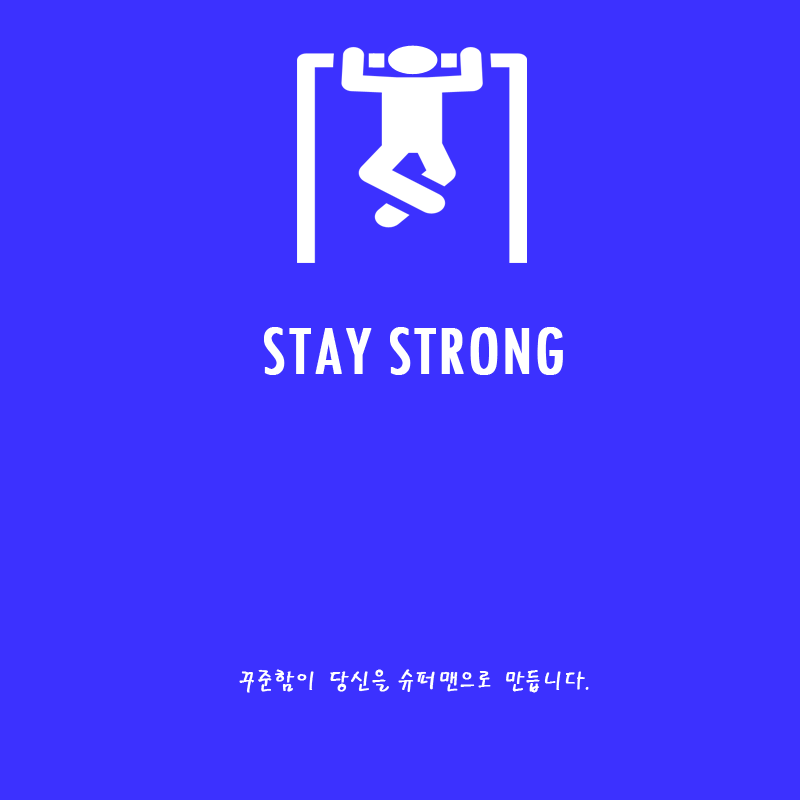
<style>
.page{position:relative;width:800px;height:800px;background:#3c31ff}
.page>*{position:absolute;margin:0}
.t1{font:72px "TwCenMT-Condensed";color:#ffffff;font-weight:bold}
.t2{font:24px "PyunjiR-HM";color:#ffffff;font-weight:bold}
</style>
<div class="page">
<p class="t1" style="left:264px;top:327px;width:299px;height:48px">STAY STRONG</p>
<p class="t2" style="left:239px;top:669px;width:350px;height:24px">꾸준함이 당신을 슈퍼맨으로 만듭니다.</p>
</div>
